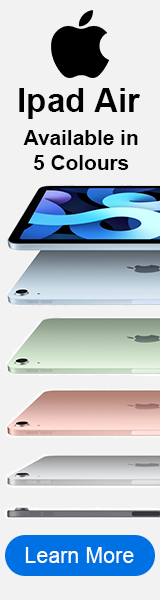
<style>
.page{position:relative;width:160px;height:600px;background:#f2f2f2}
.page>*{position:absolute;margin:0}
.t1{font:33.3px "Arial-BoldMT";color:#000000}
.t2{font:20.8px "Arial-BoldMT";color:#000000}
.t3{font:21.6px "ArialMT";color:#ffffff}
</style>
<div class="page">
<p class="t1" style="left:19px;top:88px;width:121px;height:31px">Ipad Air</p>
<p class="t2" style="left:23px;top:130px;width:115px;height:40px;text-align:center">Available in<br>5 Colours</p>
<p class="t3" style="left:25px;top:547px;width:109px;height:16px">Learn More</p>
</div>
